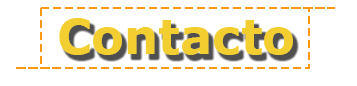
<style>
.page{position:relative;width:357px;height:86px;background:#ffffff}
.page>*{position:absolute;margin:0}
.t1{font:48px "Verdana-Bold";color:#f3ce31}
</style>
<div class="page">
<p class="t1" style="left:59px;top:18px;width:234px;height:37px">Contacto</p>
</div>
